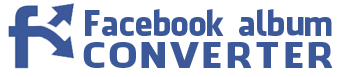
<style>
.page{position:relative;width:337px;height:77px;background:#ffffff}
.page>*{position:absolute;margin:0}
.t1{font:34.2px "FacebookLetterFaces";letter-spacing:0.01em;color:#3b5998}
.t2{font:34.2px "FacebookLetterFaces";letter-spacing:0.09em;color:#3b5998;scale:1.15 1}
</style>
<div class="page">
<p class="t1" style="left:85px;top:9px;width:247px;height:27px">Facebook album</p>
<p class="t2" style="left:83px;top:42px;width:250px;height:26px">CONVERTER</p>
</div>
